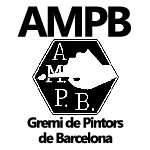
<style>
.page{position:relative;width:150px;height:150px;background:#ffffff}
.page>*{position:absolute;margin:0}
.t1{font:42.7px "SegoeUI-Bold";letter-spacing:-0.075em;color:#000000}
.t2{font:14.2px "SegoeUI-Bold";letter-spacing:-0.075em;color:#000000}
</style>
<div class="page">
<p class="t1" style="left:17px;top:6px;width:114px;height:31px">AMPB</p>
<p class="t2" style="left:27px;top:117px;width:97px;height:11px">Gremi de Pintors</p>
<p class="t2" style="left:38px;top:132px;width:75px;height:12px">de Barcelona</p>
</div>
